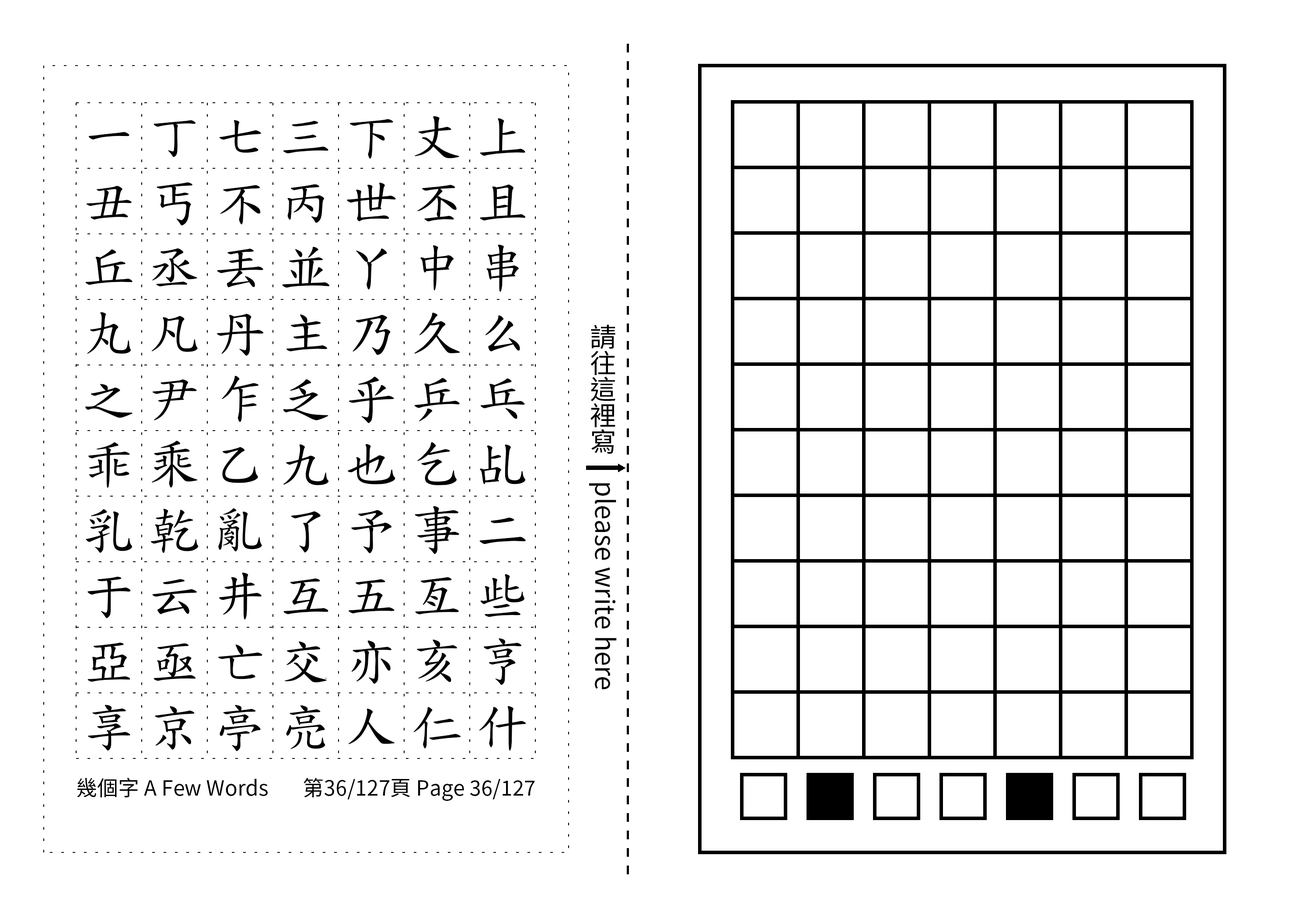
<style>
.page{position:relative;width:1299px;height:918px;background:#ffffff}
.page>*{position:absolute;margin:0}
.t1{font:52.5px/65.6px "TW-Kai-98_1";letter-spacing:0.25em;color:#000000}
.t2{font:26.2px "SourceHanSansTC-Regular";color:#000000}
.t3{font:21px "SourceHanSansTC-Regular";color:#000000}
</style>
<div class="page">
<p class="t1" style="left:85px;top:116px;width:441px;height:636px;text-align:center">一丁七三下丈上丑丐不丙世丕且丘丞丟並丫中串丸凡丹主乃久么之尹乍乏乎乒乓乖乘乙九也乞乩乳乾亂了予事二于云井互五亙些亞亟亡交亦亥亨享京亭亮人仁什</p>
<p class="t2" style="left:589px;top:324px;width:28px;height:366px;text-align:center">請往這裡寫　please write here</p>
<p class="t3" style="left:77px;top:778px;width:191px;height:20px">幾個字 A Few Words</p>
<p class="t3" style="left:303px;top:778px;width:232px;height:23px">第36/127頁 Page 36/127</p>
</div>
